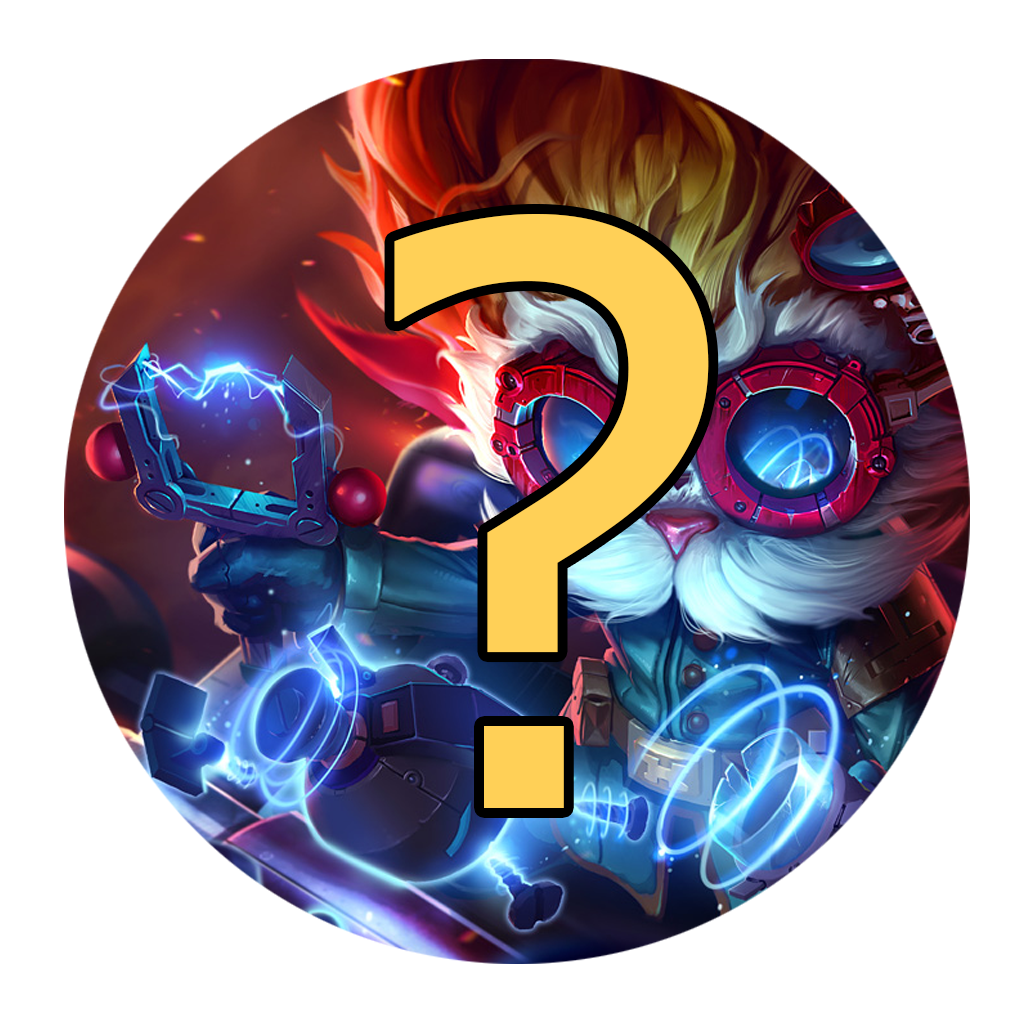
<style>
.page{position:relative;width:1024px;height:1024px;background:#ffffff}
.page>*{position:absolute;margin:0}
.t1{font:800px "Tahoma";color:#ffd057}
</style>
<div class="page">
<p class="t1" style="left:394px;top:214px;width:315px;height:594px">?</p>
</div>
